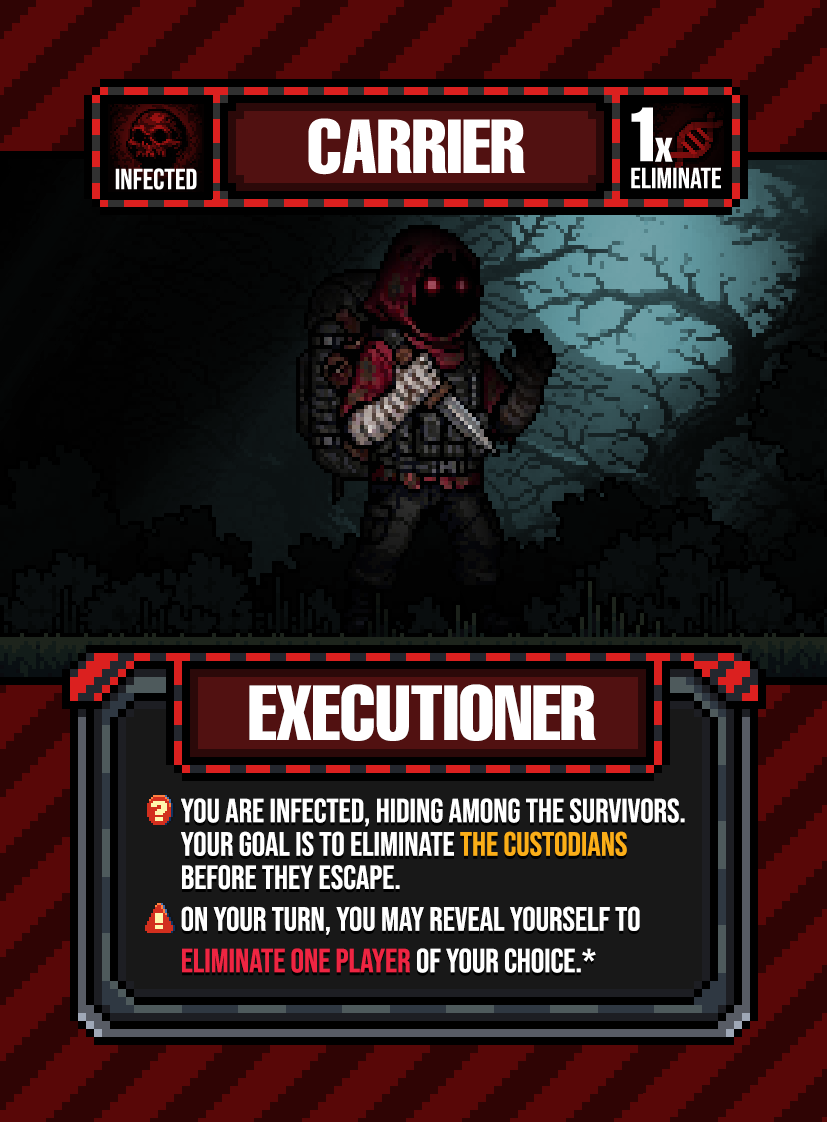
<style>
.page{position:relative;width:827px;height:1122px}
.page>*{position:absolute;margin:0}
.t1{font:76.2px "HelveticaLTPro-Compressed";color:#ffffff}
.t2{font:33.3px/33.3px "BebasNeue-Regular";color:#ffffff}
.t3{font:33.3px/33.3px "BebasNeue-Regular";color:#fbae18}
.t4{font:33.3px/41.7px "BebasNeue-Regular";color:#ffffff}
.t5{font:33.3px/41.7px "BebasNeue-Regular";color:#ee2542}
.t6{font:33.3px/33.3px "BebasNeue-Regular";color:#ee2542}
</style>
<div class="page">
<p class="t1" style="left:249px;top:684px;width:347px;height:57px">EXECUTIONER</p>
<p class="t2" style="left:181px;top:798px;width:504px;height:175px">You are infected, hiding among the Survivors.<br>Your goal is to eliminate <span class="t3">the Custodians</span> before they escape.<br><span class="t4">on your turn, you may reveal yourself to </span><span class="t5">eliminate one </span><span class="t6">player</span> of your choice.*</p>
</div>
